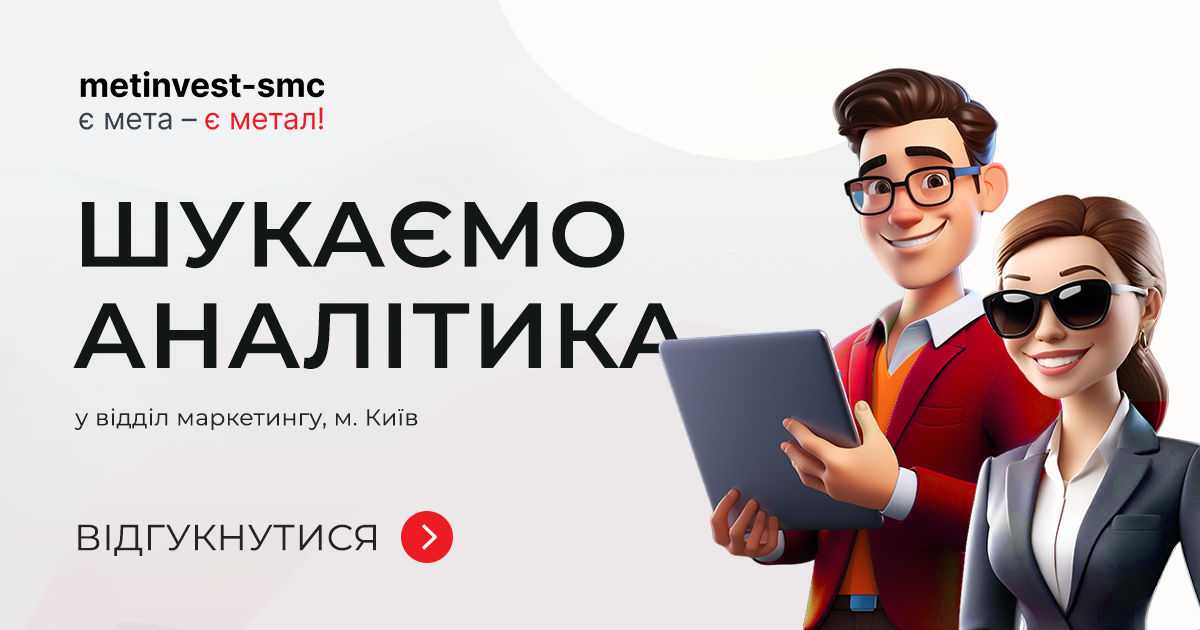
<style>
.page{position:relative;width:1200px;height:630px}
.page>*{position:absolute;margin:0}
.t1{font:92.2px/20.2px "Montserrat-SemiBold";letter-spacing:0.015em;color:#121617}
.t2{font:22.8px "Montserrat-Regular";letter-spacing:0.015em;color:#232325}
.t3{font:36px "Montserrat-Regular";letter-spacing:0.015em;color:#232325}
</style>
<div class="page">
<p class="t1" style="left:73px;top:201px;width:619px;height:168px;text-align:justify">ШУКАЄМО<br><br><br><br><br>АНАЛІТИКА</p>
<p class="t2" style="left:74px;top:408px;width:344px;height:22px">у відділ маркетингу, м. Київ</p>
<p class="t3" style="left:78px;top:524px;width:298px;height:32px">ВІДГУКНУТИСЯ</p>
</div>
